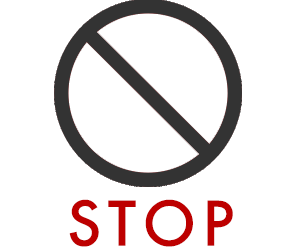
<style>
.page{position:relative;width:300px;height:250px;background:#ffffff}
.page>*{position:absolute;margin:0}
.t1{font:60px "Futura-Medium";letter-spacing:0.1em;color:#bd0000}
</style>
<div class="page">
<p class="t1" style="left:69px;top:199px;width:164px;height:48px">STOP</p>
</div>
